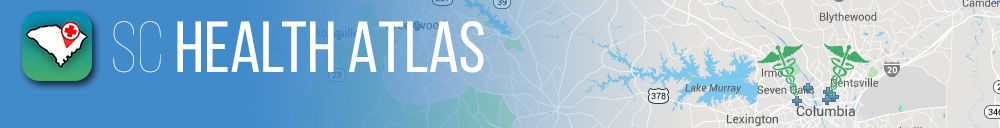
<style>
.page{position:relative;width:1000px;height:128px}
.page>*{position:absolute;margin:0}
.t1{font:72px "BebasNeueRegular";color:#ffffff}
.t2{font:72px "BebasNeue-Thin";color:#ffffff}
</style>
<div class="page">
<p class="t1" style="left:113px;top:21px;width:371px;height:52px"><span class="t2">SC </span>HEALTH ATLAS</p>
</div>
